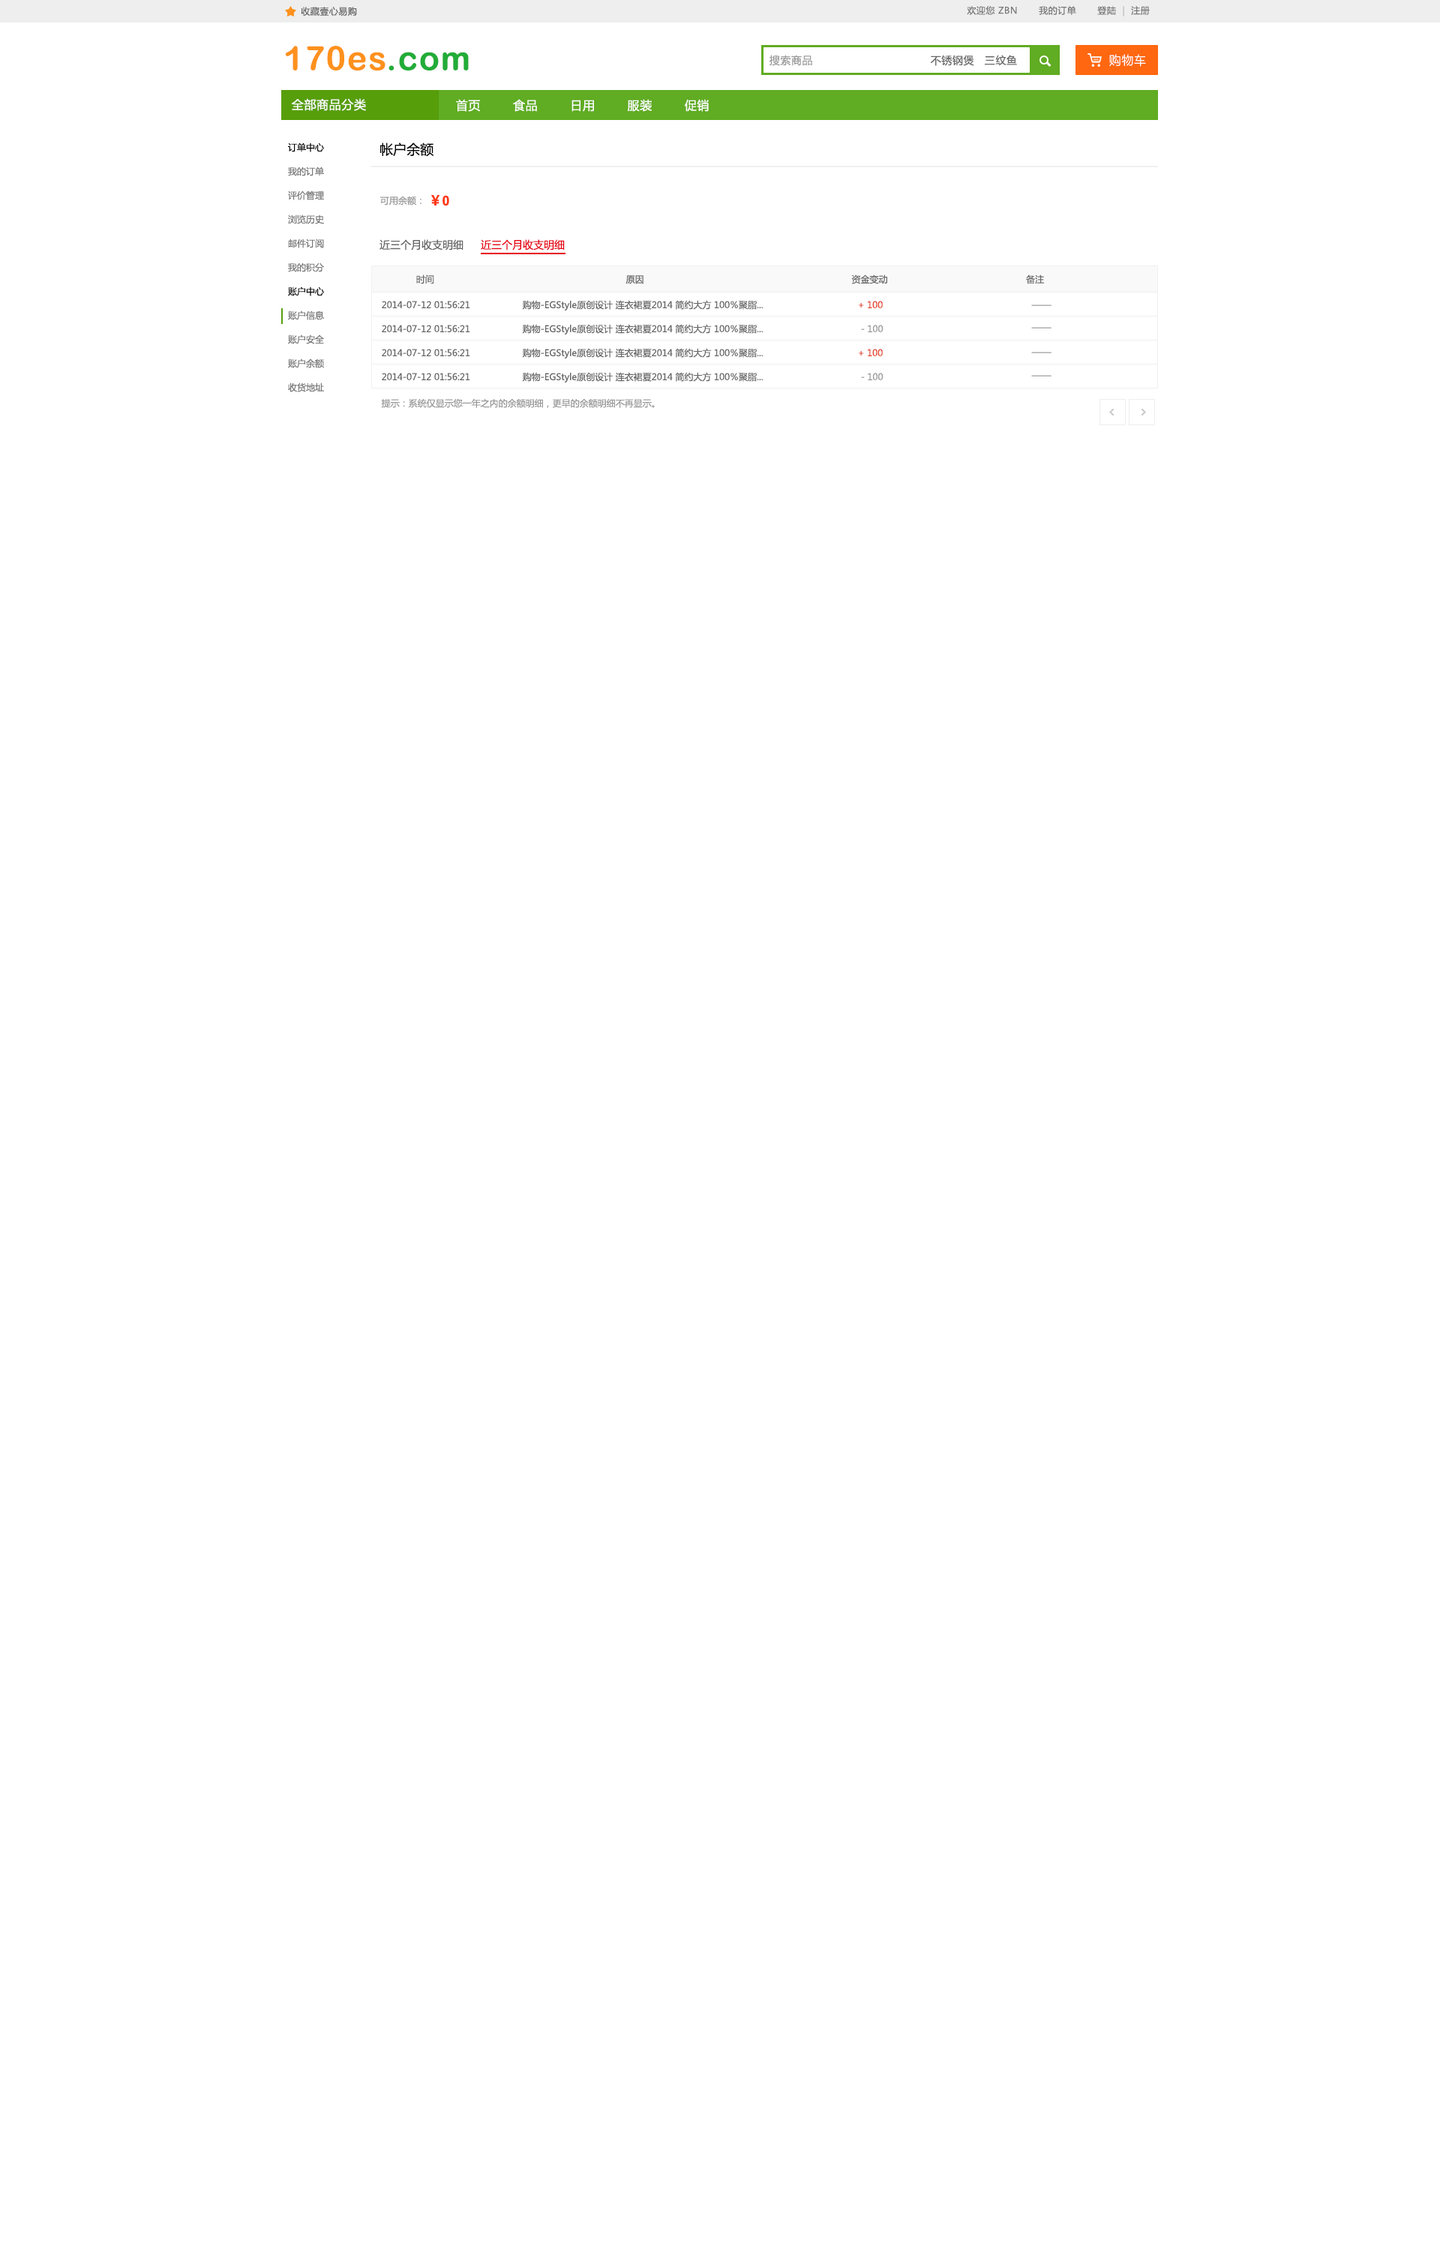
<style>
.page{position:relative;width:1440px;height:2250px;background:#ffffff}
.page>*{position:absolute;margin:0}
.t1{font:9px "MicrosoftYaHei";letter-spacing:0.04em;color:#787878}
.t2{font:9px "MicrosoftYaHei";letter-spacing:0.04em;color:#bbbbbb}
.t3{font:9px "MicrosoftYaHei";letter-spacing:0.04em;color:#666666}
.t4{font:33.5px "ArialRoundedMTBold";letter-spacing:0.04em;color:#ff911d}
.t5{font:33.5px "ArialRoundedMTBold";letter-spacing:0.04em;color:#22ac38}
.t6{font:12px "MicrosoftYaHei";letter-spacing:0.04em;color:#ffffff}
.t7{font:10.5px "MicrosoftYaHei";letter-spacing:0.04em;color:#999999}
.t8{font:10.5px "MicrosoftYaHei";letter-spacing:0.04em;color:#666666}
.t9{font:9px/24px "MicrosoftYaHei";color:#777777}
.t10{font:9px/24px "MicrosoftYaHei";color:#000000}
.t11{font:13.5px "MicrosoftYaHei";color:#000000}
.t12{font:9px "MicrosoftYaHei";color:#999999}
.t13{font:13.5px "MicrosoftYaHeiBold";color:#ff3816}
.t14{font:13.5px "Arial-BoldMT";color:#ff3816}
.t15{font:10.5px "MicrosoftYaHei";color:#666666}
.t16{font:10.5px "MicrosoftYaHei";color:#e60012}
.t17{font:9px "MicrosoftYaHei";color:#666666}
.t18{font:9px "MicrosoftYaHei";color:#e23e22}
.t19{font:9px "MicrosoftYaHei"}
</style>
<div class="page">
<p class="t1" style="left:967px;top:6px;width:183px;height:10px">欢迎您 ZBN       我的订单       登陆  <span class="t2">|</span>  注册</p>
<p class="t3" style="left:301px;top:7px;width:56px;height:9px">收藏壹心易购</p>
<p class="t4" style="left:285px;top:46px;width:184px;height:24px">170es<span class="t5">.com</span></p>
<p class="t6" style="left:1109px;top:54px;width:37px;height:13px">购物车</p>
<p class="t7" style="left:770px;top:55px;width:42px;height:11px">搜索商品</p>
<p class="t8" style="left:930px;top:55px;width:44px;height:11px">不锈钢煲</p>
<p class="t8" style="left:985px;top:55px;width:32px;height:11px">三纹鱼</p>
<p class="t6" style="left:291px;top:98px;width:75px;height:13px">全部商品分类</p>
<p class="t6" style="left:456px;top:99px;width:253px;height:13px">首页        食品        日用        服装        促销</p>
<p class="t9" style="left:288px;top:142px;width:36px;height:250px"><span class="t10">订单中心</span><br>我的订单<br>评价管理<br>浏览历史<br>邮件订阅<br>我的积分<br><span class="t10">账户中心</span><br>账户信息<br>账户安全<br>账户余额<br>收货地址</p>
<p class="t11" style="left:380px;top:142px;width:54px;height:15px">帐户余额</p>
<p class="t12" style="left:380px;top:196px;width:42px;height:10px">可用余额：</p>
<p class="t13" style="left:431px;top:195px;width:18px;height:11px">￥<span class="t14">0</span></p>
<p class="t15" style="left:380px;top:239px;width:84px;height:11px">近三个月收支明细</p>
<p class="t16" style="left:481px;top:239px;width:84px;height:11px">近三个月收支明细</p>
<p class="t17" style="left:416px;top:274px;width:628px;height:10px">时间                                                                        原因                                                                              资金变动                                                    备注</p>
<p class="t17" style="left:382px;top:301px;width:88px;height:7px">2014-07-12 01:56:21</p>
<p class="t17" style="left:522px;top:300px;width:242px;height:10px">购物-EGStyle原创设计 连衣裙夏2014 简约大方 100％聚脂...</p>
<p class="t18" style="left:859px;top:301px;width:24px;height:7px">+ 100</p>
<p class="t19" style="left:1031px;top:304px;width:21px;height:2px">——</p>
<p class="t17" style="left:382px;top:325px;width:88px;height:7px">2014-07-12 01:56:21</p>
<p class="t17" style="left:522px;top:324px;width:242px;height:10px">购物-EGStyle原创设计 连衣裙夏2014 简约大方 100％聚脂...</p>
<p class="t12" style="left:861px;top:325px;width:23px;height:7px">- 100</p>
<p class="t19" style="left:1031px;top:327px;width:21px;height:1px">——</p>
<p class="t17" style="left:382px;top:349px;width:88px;height:7px">2014-07-12 01:56:21</p>
<p class="t17" style="left:522px;top:348px;width:242px;height:10px">购物-EGStyle原创设计 连衣裙夏2014 简约大方 100％聚脂...</p>
<p class="t18" style="left:859px;top:349px;width:24px;height:7px">+ 100</p>
<p class="t19" style="left:1031px;top:352px;width:21px;height:1px">——</p>
<p class="t17" style="left:382px;top:373px;width:88px;height:7px">2014-07-12 01:56:21</p>
<p class="t17" style="left:522px;top:372px;width:242px;height:10px">购物-EGStyle原创设计 连衣裙夏2014 简约大方 100％聚脂...</p>
<p class="t12" style="left:861px;top:373px;width:23px;height:7px">- 100</p>
<p class="t19" style="left:1031px;top:375px;width:21px;height:1px">——</p>
<p class="t12" style="left:381px;top:398px;width:274px;height:10px">提示：系统仅显示您一年之内的余额明细，更早的余额明细不再显示。</p>
</div>
